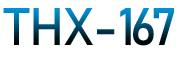
<style>
.page{position:relative;width:186px;height:59px;background:#ffffff}
.page>*{position:absolute;margin:0}
.t1{font:52px "Bahnschrift";text-transform:uppercase}
.t2{font:52px "Bahnschrift";letter-spacing:-0.1em;text-transform:uppercase}
</style>
<div class="page">
<p class="t1" style="left:3px;top:8px;width:171px;height:38px">thx-<span class="t2">167</span></p>
</div>
